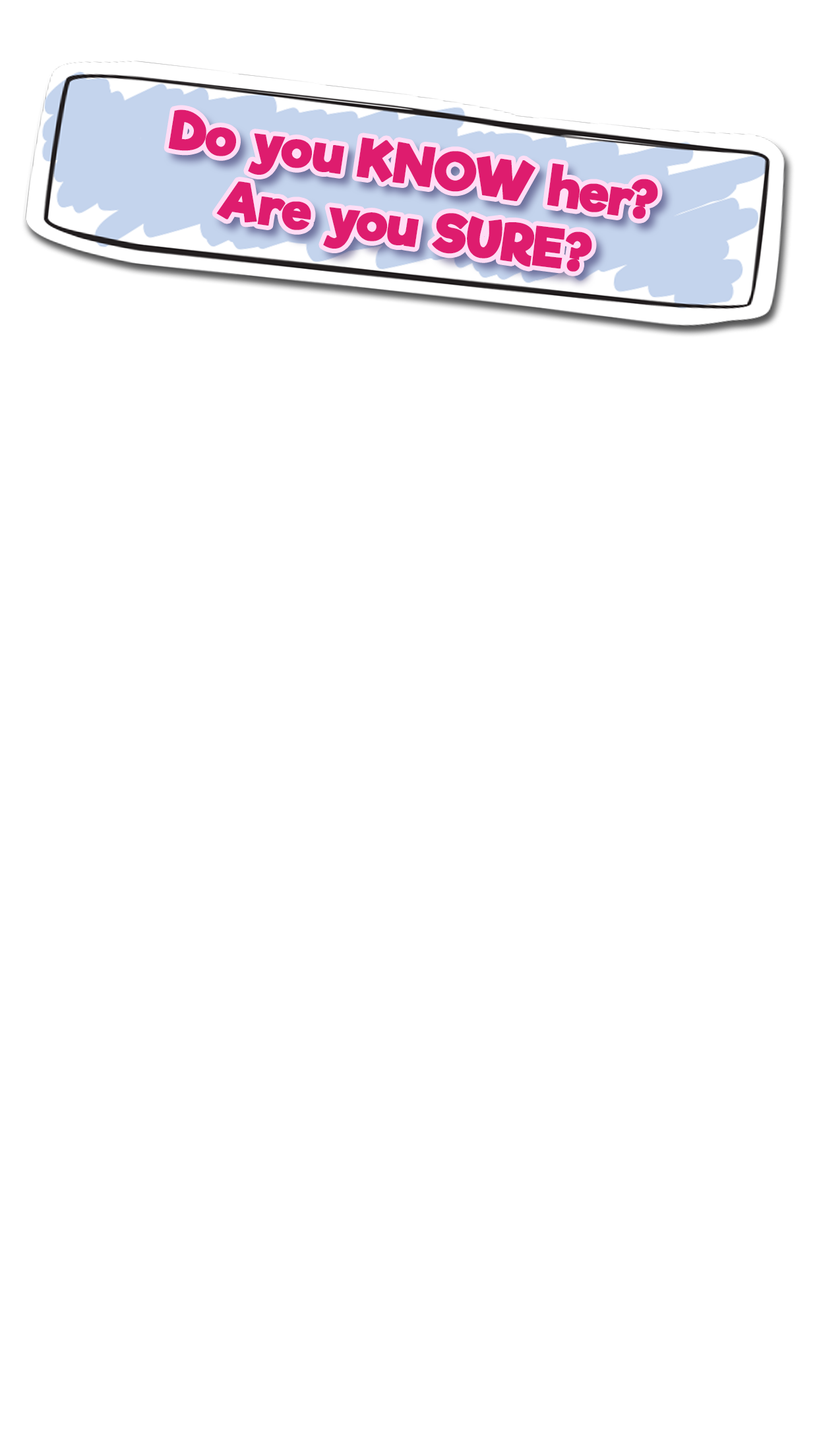
<style>
.page{position:relative;width:819px;height:1456px;background:#ffffff}
.page>*{position:absolute;margin:0}
.t1{font:51.5px "RifficFree-Bold";color:#de1c6e;font-weight:bold}
</style>
<div class="page">
<p class="t1" style="left:168px;top:109px;width:490px;height:163px;text-align:center;rotate:9deg">Do you KNOW her?<br>Are you SURE?</p>
</div>
